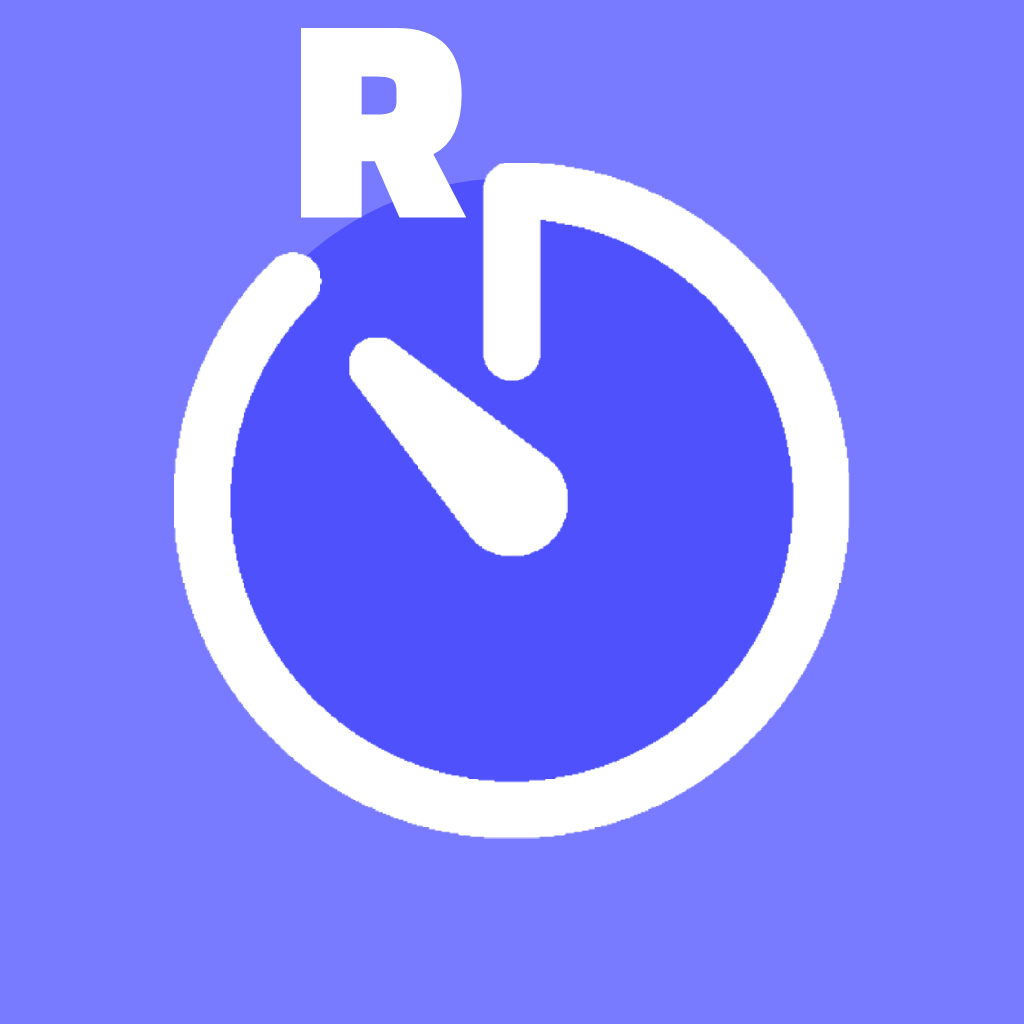
<style>
.page{position:relative;width:1024px;height:1024px;background:#787aff}
.page>*{position:absolute;margin:0}
.t1{font:252.6px "BlackHanSans-Regular";color:#ffffff}
</style>
<div class="page">
<p class="t1" style="left:301px;top:28px;width:166px;height:190px">R</p>
</div>
